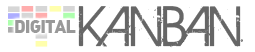
<style>
.page{position:relative;width:255px;height:52px;background:#ffffff}
.page>*{position:absolute;margin:0}
.t1{font:62px "BIRTHOFAHERO";color:#666666;text-transform:uppercase}
.t2{font:18px "DINBlackAlternate";letter-spacing:-0.05em;color:#999999;text-transform:uppercase}
</style>
<div class="page">
<p class="t1" style="left:78px;top:6px;width:165px;height:42px">Kanban</p>
<p class="t2" style="left:15px;top:20px;width:61px;height:13px">Digital</p>
</div>
